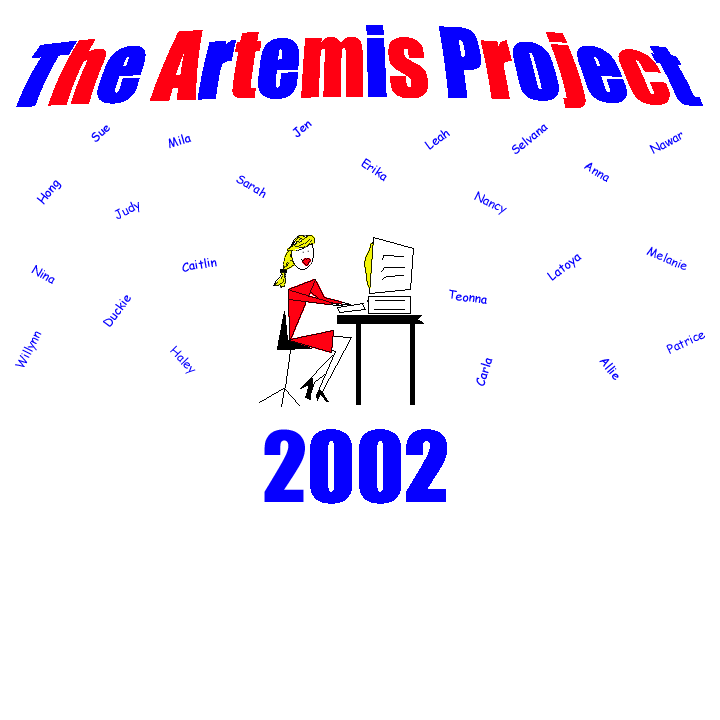
<style>
.page{position:relative;width:720px;height:720px;background:#ffffff}
.page>*{position:absolute;margin:0}
.t1{font:12px "ComicSansMS";color:#0600ff}
</style>
<div class="page">
<p class="t1" style="left:91px;top:125px;width:19px;height:17px;rotate:-41deg">Sue</p>
<p class="t1" style="left:292px;top:121px;width:20px;height:16px;rotate:-41deg">Jen</p>
<p class="t1" style="left:512px;top:124px;width:36px;height:30px;rotate:-38deg">Selvana</p>
<p class="t1" style="left:168px;top:134px;width:24px;height:15px;rotate:-16deg">Mila</p>
<p class="t1" style="left:424px;top:130px;width:26px;height:20px;rotate:-36deg">Leah</p>
<p class="t1" style="left:649px;top:132px;width:34px;height:22px;rotate:-28deg">Nawar</p>
<p class="t1" style="left:361px;top:158px;width:26px;height:24px;rotate:34deg">Erika</p>
<p class="t1" style="left:584px;top:162px;width:25px;height:20px;rotate:31deg">Anna</p>
<p class="t1" style="left:36px;top:180px;width:26px;height:25px;rotate:-52deg">Hong</p>
<p class="t1" style="left:236px;top:175px;width:30px;height:23px;rotate:31deg">Sarah</p>
<p class="t1" style="left:474px;top:191px;width:33px;height:24px;rotate:26deg">Nancy</p>
<p class="t1" style="left:114px;top:201px;width:26px;height:18px;rotate:-27deg">Judy</p>
<p class="t1" style="left:646px;top:246px;width:41px;height:24px;rotate:23deg">Melanie</p>
<p class="t1" style="left:547px;top:254px;width:35px;height:27px;rotate:-36deg">Latoya</p>
<p class="t1" style="left:31px;top:265px;width:24px;height:19px;rotate:31deg">Nina</p>
<p class="t1" style="left:182px;top:258px;width:35px;height:14px;rotate:-10deg">Caitlin</p>
<p class="t1" style="left:449px;top:289px;width:38px;height:15px;rotate:9deg">Teonna</p>
<p class="t1" style="left:103px;top:295px;width:28px;height:32px;rotate:-54deg">Duckie</p>
<p class="t1" style="left:15px;top:331px;width:27px;height:36px;rotate:-63deg">Willynn</p>
<p class="t1" style="left:666px;top:332px;width:39px;height:22px;rotate:-25deg">Patrice</p>
<p class="t1" style="left:170px;top:345px;width:26px;height:29px;rotate:46deg">Haley</p>
<p class="t1" style="left:476px;top:358px;width:17px;height:28px;rotate:-73deg">Carla</p>
<p class="t1" style="left:599px;top:359px;width:20px;height:21px;rotate:50deg">Allie</p>
</div>
